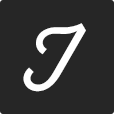
<style>
.page{position:relative;width:114px;height:114px;background:#262626}
.page>*{position:absolute;margin:0}
.t1{font:81px "Wisdom-Script";color:#ffffff}
</style>
<div class="page">
<p class="t1" style="left:23px;top:23px;width:63px;height:69px">T</p>
</div>
